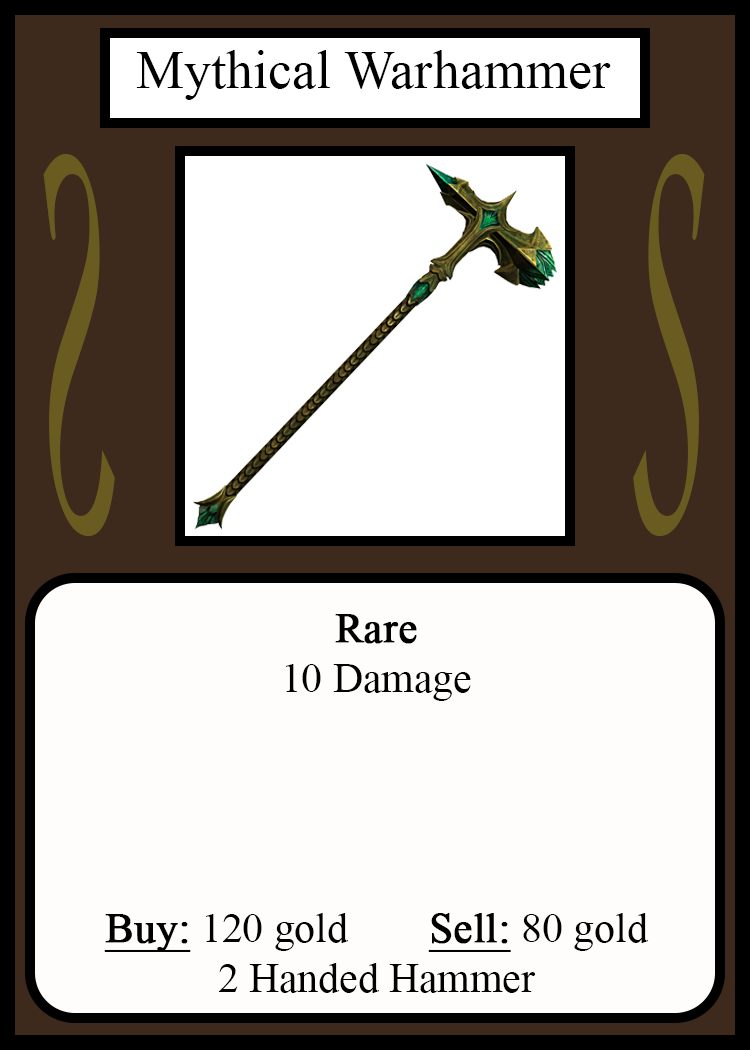
<style>
.page{position:relative;width:750px;height:1050px;background:#fffcfc}
.page>*{position:absolute;margin:0}
.t1{font:54.2px "TimesNewRomanPSMT";color:#010101}
.t2{font:548.5px "Apple-Chancery";color:#6a5c21;scale:0.27 1}
.t3{font:548.2px "Apple-Chancery";color:#6a5c21;scale:0.27 1}
.t4{font:41.7px "TimesNewRomanPSMT";color:#000000}
.t5{font:41.7px "TimesNewRomanPSMT";color:#000000;font-weight:bold}
.t6{font:41.7px "TimesNewRomanPSMT";color:#000000;font-weight:bold;text-decoration:underline}
</style>
<div class="page">
<p class="t1" style="left:136px;top:50px;width:475px;height:50px">Mythical Warhammer</p>
<p class="t2" style="left:43px;top:154px;width:72px;height:382px;rotate:180deg">S</p>
<p class="t3" style="left:633px;top:154px;width:72px;height:382px">S</p>
<p class="t4" style="left:104px;top:614px;width:545px;height:379px;text-align:center"><span class="t5">Rare<br></span>10 Damage<br><br><br><br><br><span class="t6">Buy:</span> 120 gold   <span class="t6">Sell:</span> 80 gold<br>2 Handed Hammer</p>
</div>
